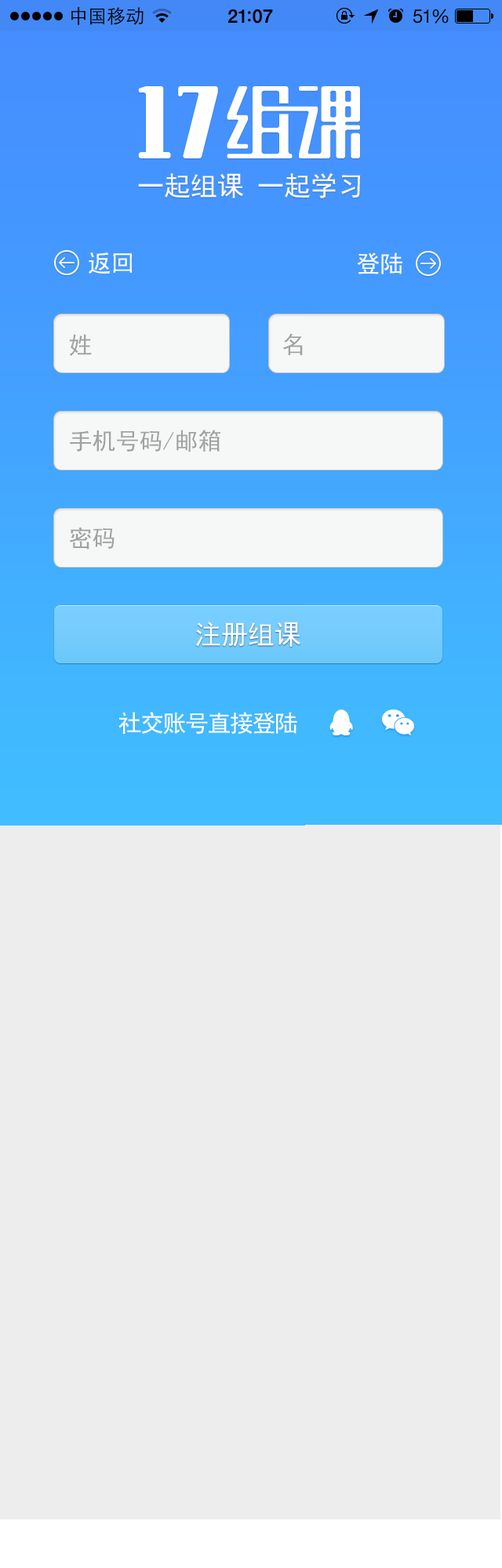
<style>
.page{position:relative;width:502px;height:1568px;background:#ededed}
.page>*{position:absolute;margin:0}
.t1{font:26.7px "SimHei";color:#fbfbfb}
.t2{font:23.5px "SimHei";color:#fefefe}
.t3{font:23.5px "SimHei";color:#a1a1a1}
.t4{font:26.7px "SimHei";color:#fefefe}
.t5{font:23.5px "SimHei";letter-spacing:-0.05em;color:#fefefe}
</style>
<div class="page">
<p class="t1" style="left:138px;top:172px;width:223px;height:26px">一起组课 一起学习</p>
<p class="t2" style="left:89px;top:252px;width:43px;height:22px">返回</p>
<p class="t2" style="left:357px;top:252px;width:45px;height:22px">登陆</p>
<p class="t3" style="left:69px;top:334px;width:23px;height:22px">姓</p>
<p class="t3" style="left:283px;top:333px;width:20px;height:22px">名</p>
<p class="t3" style="left:70px;top:430px;width:150px;height:22px">手机号码/邮箱</p>
<p class="t3" style="left:69px;top:527px;width:45px;height:23px">密码</p>
<p class="t4" style="left:195px;top:622px;width:105px;height:25px">注册组课</p>
<p class="t5" style="left:118px;top:712px;width:179px;height:23px">社交账号直接登陆</p>
</div>
